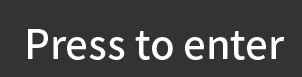
<style>
.page{position:relative;width:302px;height:77px;background:#333333}
.page>*{position:absolute;margin:0}
.t1{font:39.6px "NotoSansCJKjp-Medium";color:#ffffff}
</style>
<div class="page">
<p class="t1" style="left:28px;top:29px;width:257px;height:31px">Press to enter</p>
</div>
